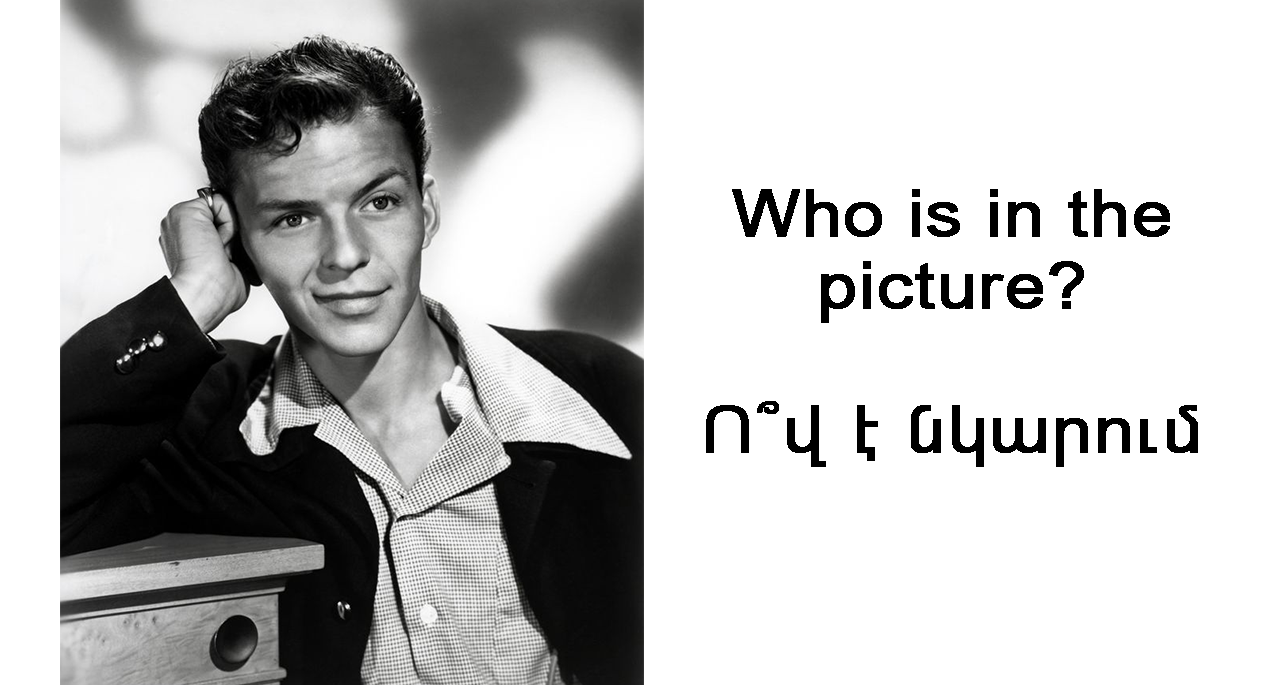
<style>
.page{position:relative;width:1280px;height:685px;background:#ffffff}
.page>*{position:absolute;margin:0}
.t1{font:64.8px/72px "ArialUnicode";color:#000000;font-weight:bold;scale:1.11 1}
</style>
<div class="page">
<p class="t1" style="left:706px;top:189px;width:492px;height:278px;text-align:center">Who is in the picture?<br><br>Ո՞վ է նկարում</p>
</div>
